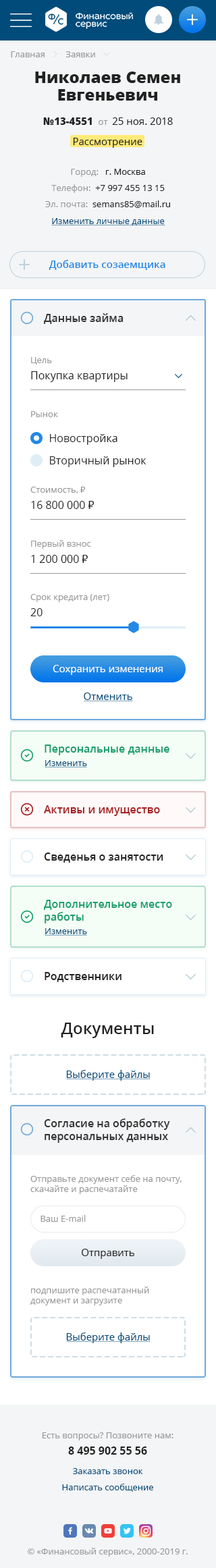
<style>
.page{position:relative;width:216px;height:1568px;background:#ffffff}
.page>*{position:absolute;margin:0}
.t1{font:8.8px "OpenSans";color:#999999}
.t2{font:16.2px/17.5px "OpenSans-Extrabold";color:#222222}
.t3{font:10.1px "OpenSans";color:#222222}
.t4{font:10.1px "OpenSans-Extrabold";color:#222222}
.t5{font:8.8px/16.2px "OpenSans";color:#222222}
.t6{font:8.8px/16.2px "OpenSans";color:#999999}
.t7{font:8.8px "OpenSans";color:#004b7a}
.t8{font:10.1px "OpenSans-Semibold";color:#2389e5}
.t9{font:10.8px "OpenSans-Semibold";color:#333333}
.t10{font:10.8px/16.2px "OpenSans";color:#222222}
.t11{font:10.8px "OpenSans";color:#222222}
.t12{font:8.8px "Tahoma";color:#999999}
.t13{font:10.8px/16.2px "Tahoma";color:#222222}
.t14{font:10.1px "OpenSans";color:#ffffff}
.t15{font:10.1px "OpenSans";color:#004b7a}
.t16{font:10.8px "OpenSans-Semibold";color:#189f6c}
.t17{font:10.8px "OpenSans-Semibold";color:#a71f1f}
.t18{font:10.8px "OpenSans-Semibold";color:#222222}
.t19{font:16.2px "OpenSans-Semibold";color:#222222}
.t20{font:10.8px/16.2px "OpenSans-Bold";color:#222222}
.t21{font:8.8px/16.2px "OpenSans";color:#004b7a}
</style>
<div class="page">
<p class="t1" style="left:11px;top:51px;width:84px;height:6px">Главная         Заявки</p>
<p class="t2" style="left:35px;top:72px;width:145px;height:29px;text-align:center">Николаев Семен Евгеньевич</p>
<p class="t3" style="left:43px;top:117px;width:130px;height:8px"><span class="t4">№13-4551  </span><span class="t1">от  </span>25 ноя. 2018</p>
<p class="t3" style="left:73px;top:138px;width:69px;height:10px"><span class="t1"> </span>Рассмотрение</p>
<p class="t5" style="left:45px;top:169px;width:125px;height:39px;text-align:center"><span class="t6">Город:   </span>г. Москва   <br><span class="t6">Телефон:  </span>+7 997 455 13 15<br><span class="t6">Эл. почта:  </span>semans85@mail.ru</p>
<p class="t7" style="left:52px;top:218px;width:113px;height:7px">Изменить личные данные</p>
<p class="t8" style="left:49px;top:260px;width:116px;height:10px">Добавить созаемщика</p>
<p class="t9" style="left:44px;top:313px;width:80px;height:11px">Данные займа</p>
<p class="t10" style="left:31px;top:357px;width:97px;height:25px"><span class="t1">Цель<br></span>Покупка квартиры</p>
<p class="t1" style="left:31px;top:411px;width:27px;height:6px">Рынок</p>
<p class="t11" style="left:50px;top:434px;width:67px;height:11px">Новостройка</p>
<p class="t11" style="left:50px;top:456px;width:96px;height:11px">Вторичный рынок</p>
<p class="t1" style="left:30px;top:487px;width:64px;height:22px">Стоимость, <span class="t12">₽<br></span><span class="t10">16 800 000 </span><span class="t13">₽</span></p>
<p class="t1" style="left:31px;top:540px;width:60px;height:23px">Первый взнос <br><span class="t10">1 200 000 </span><span class="t13">₽</span></p>
<p class="t1" style="left:30px;top:594px;width:79px;height:22px">Срок кредита (лет)<br><span class="t10">20</span></p>
<p class="t14" style="left:53px;top:665px;width:110px;height:10px">Сохранить изменения</p>
<p class="t15" style="left:84px;top:693px;width:48px;height:7px">Отменить</p>
<p class="t16" style="left:45px;top:745px;width:124px;height:10px">Персональные данные</p>
<p class="t7" style="left:45px;top:760px;width:42px;height:6px">Изменить</p>
<p class="t17" style="left:44px;top:805px;width:116px;height:11px">Активы и имущество</p>
<p class="t18" style="left:44px;top:853px;width:119px;height:10px">Сведенья о занятости</p>
<p class="t16" style="left:44px;top:900px;width:128px;height:23px">Дополнительное место работы</p>
<p class="t7" style="left:45px;top:928px;width:42px;height:6px">Изменить</p>
<p class="t18" style="left:45px;top:972px;width:76px;height:10px">Родственники</p>
<p class="t19" style="left:61px;top:1023px;width:93px;height:15px">Документы</p>
<p class="t15" style="left:66px;top:1070px;width:84px;height:11px">Выберите файлы</p>
<p class="t9" style="left:44px;top:1118px;width:126px;height:25px">Согласие на обработку персональных данных</p>
<p class="t1" style="left:30px;top:1175px;width:152px;height:19px">Отправьте документ себе на почту, скачайте и распечатайте</p>
<p class="t1" style="left:40px;top:1215px;width:46px;height:7px">Ваш E-mail</p>
<p class="t3" style="left:82px;top:1249px;width:52px;height:10px">Отправить</p>
<p class="t1" style="left:30px;top:1287px;width:119px;height:18px">подпишите распечатанный документ и загрузите</p>
<p class="t15" style="left:66px;top:1332px;width:84px;height:11px">Выберите файлы</p>
<p class="t6" style="left:42px;top:1432px;width:131px;height:23px;text-align:center">Есть вопросы? Позвоните нам:<br><span class="t20">8 495 902 55 56</span></p>
<p class="t21" style="left:62px;top:1468px;width:91px;height:24px;text-align:center">Заказать звонок          <br>Написать сообщение</p>
<p class="t1" style="left:28px;top:1548px;width:160px;height:9px">© «Финансовый сервис», 2000-2019 г.</p>
</div>
